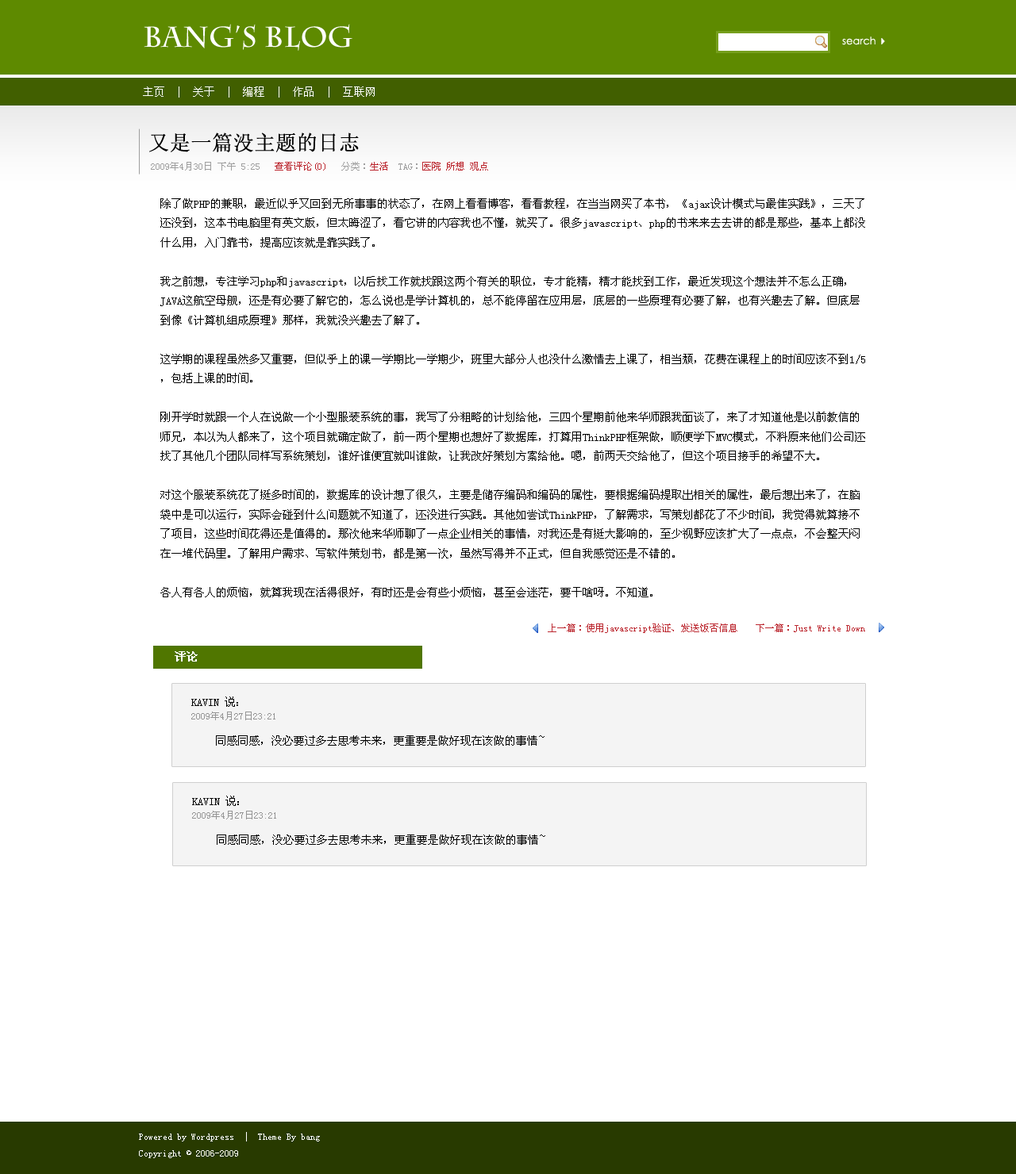
<style>
.page{position:relative;width:1016px;height:1174px;background:#ffffff}
.page>*{position:absolute;margin:0}
.t1{font:28.6px "CharlemagneStd-Bold";color:#ffffff}
.t2{font:10.3px "CenturyGothic";color:#ffffff}
.t3{font:11.1px "SimSun";color:#ffffff}
.t4{font:20.6px "SimSun";color:#000000;font-weight:bold}
.t5{font:9.5px "SimSun";color:#9e9e9e}
.t6{font:9.5px "SimSun";color:#bc2931}
.t7{font:11.1px "SimSun";color:#000000}
.t8{font:11.1px "SimSun";color:#ffffff;font-weight:bold}
.t9{font:9.5px "SimSun";color:#959595}
.t10{font:9.5px "SimSun";color:#ffffff}
</style>
<div class="page">
<p class="t1" style="left:144px;top:24px;width:208px;height:27px">Bang’s Blog</p>
<p class="t2" style="left:842px;top:36px;width:33px;height:9px">search</p>
<p class="t3" style="left:143px;top:86px;width:231px;height:12px">主页  |  关于  |  编程  |  作品  |  互联网</p>
<p class="t4" style="left:149px;top:132px;width:210px;height:20px">又是一篇没主题的日志</p>
<p class="t5" style="left:151px;top:162px;width:337px;height:9px">2009年4月30日 下午 5:25   <span class="t6">查看评论(0)   </span>分类：<span class="t6">生活  </span>TAG：<span class="t6">医院 所想 观点</span></p>
<p class="t7" style="left:160px;top:198px;width:705px;height:399px">除了做PHP的兼职，最近似乎又回到无所事事的状态了，在网上看看博客，看看教程，在当当网买了本书，《ajax设计模式与最佳实践》，三天了还没到，这本书电脑里有英文版，但太晦涩了，看它讲的内容我也不懂，就买了。很多javascript、php的书来来去去讲的都是那些，基本上都没什么用，入门靠书，提高应该就是靠实践了。<br><br>我之前想，专注学习php和javascript，以后找工作就找跟这两个有关的职位，专才能精，精才能找到工作，最近发现这个想法并不怎么正确，JAVA这航空母舰，还是有必要了解它的，怎么说也是学计算机的，总不能停留在应用层，底层的一些原理有必要了解，也有兴趣去了解。但底层到像《计算机组成原理》那样，我就没兴趣去了解了。<br><br>这学期的课程虽然多又重要，但似乎上的课一学期比一学期少，班里大部分人也没什么激情去上课了，相当颓，花费在课程上的时间应该不到1/5，包括上课的时间。<br><br>刚开学时就跟一个人在说做一个小型服装系统的事，我写了分粗略的计划给他，三四个星期前他来华师跟我面谈了，来了才知道他是以前教信的师兄，本以为人都来了，这个项目就确定做了，前一两个星期也想好了数据库，打算用ThinkPHP框架做，顺便学下MVC模式，不料原来他们公司还找了其他几个团队同样写系统策划，谁好谁便宜就叫谁做，让我改好策划方案给他。嗯，前两天交给他了，但这个项目接手的希望不大。<br><br>对这个服装系统花了挺多时间的，数据库的设计想了很久，主要是储存编码和编码的属性，要根据编码提取出相关的属性，最后想出来了，在脑袋中是可以运行，实际会碰到什么问题就不知道了，还没进行实践。其他如尝试ThinkPHP，了解需求，写策划都花了不少时间，我觉得就算接不了项目，这些时间花得还是值得的。那次他来华师聊了一点企业相关的事情，对我还是有挺大影响的，至少视野应该扩大了一点点，不会整天闷在一堆代码里。了解用户需求、写软件策划书，都是第一次，虽然写得并不正式，但自我感觉还是不错的。<br><br>各人有各人的烦恼，就算我现在活得很好，有时还是会有些小烦恼，甚至会迷茫，要干啥呀。不知道。</p>
<p class="t6" style="left:547px;top:624px;width:190px;height:9px">上一篇：使用javascript验证、发送饭否信息</p>
<p class="t6" style="left:755px;top:624px;width:110px;height:8px">下一篇：Just Write Down</p>
<p class="t8" style="left:175px;top:651px;width:23px;height:11px">评论</p>
<p class="t7" style="left:191px;top:697px;width:47px;height:10px">KAVIN 说：</p>
<p class="t9" style="left:191px;top:712px;width:84px;height:8px">2009年4月27日23:21</p>
<p class="t7" style="left:216px;top:735px;width:328px;height:11px">同感同感，没必要过多去思考未来，更重要是做好现在该做的事情~</p>
<p class="t7" style="left:192px;top:796px;width:47px;height:10px">KAVIN 说：</p>
<p class="t9" style="left:192px;top:811px;width:84px;height:9px">2009年4月27日23:21</p>
<p class="t7" style="left:217px;top:835px;width:328px;height:10px">同感同感，没必要过多去思考未来，更重要是做好现在该做的事情~</p>
<p class="t10" style="left:139px;top:1132px;width:181px;height:26px">Powered by Wordpress  |  Theme By bang<br>Copyright © 2006-2009</p>
</div>
